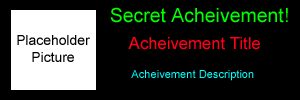
<style>
.page{position:relative;width:300px;height:100px;background:#000000}
.page>*{position:absolute;margin:0}
.t1{font:19.4px "ArialMT";color:#00ff00}
.t2{font:13.9px "ArialMT";color:#000000}
.t3{font:16.7px "ArialMT";color:#ff0018}
.t4{font:11.1px "ArialMT";color:#00ffff}
</style>
<div class="page">
<p class="t1" style="left:110px;top:7px;width:178px;height:16px">Secret Acheivement!</p>
<p class="t2" style="left:17px;top:35px;width:73px;height:27px;text-align:center">Placeholder<br>Picture</p>
<p class="t3" style="left:128px;top:37px;width:132px;height:13px">Acheivement Title</p>
<p class="t4" style="left:131px;top:70px;width:123px;height:11px">Acheivement Description</p>
</div>
